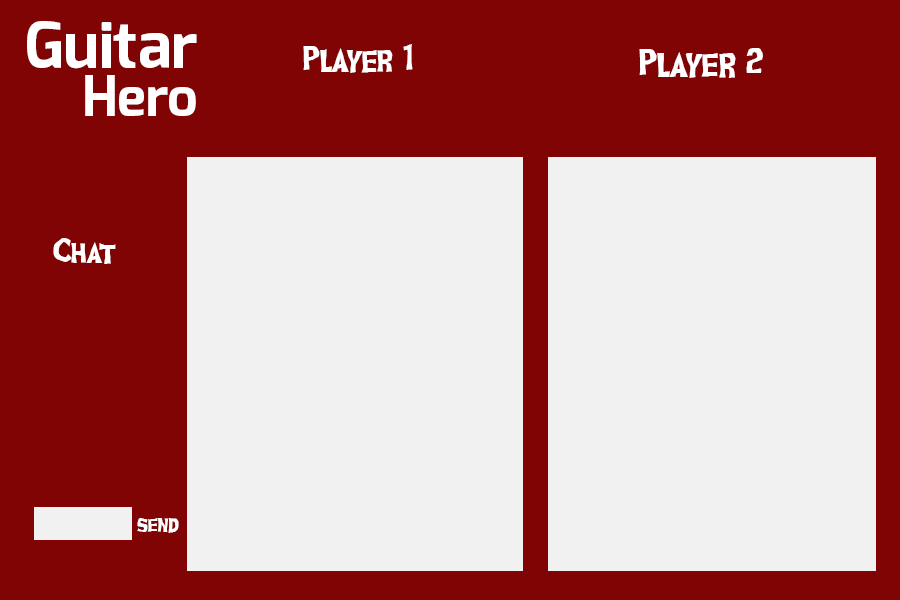
<style>
.page{position:relative;width:900px;height:600px;background:#f1f1f1}
.page>*{position:absolute;margin:0}
.t1{font:64px "Exo-Bold";color:#ffffff}
.t2{font:41px "GhoulishFrightAOE";color:#ffffff}
.t3{font:44px "GhoulishFrightAOE";color:#ffffff}
.t4{font:55px "Exo-Bold";color:#ffffff}
.t5{font:37px "GhoulishFrightAOE";color:#ffffff}
.t6{font:26px "GhoulishFrightAOE";color:#ffffff}
</style>
<div class="page">
<p class="t1" style="left:27px;top:21px;width:170px;height:48px">Guitar</p>
<p class="t2" style="left:303px;top:44px;width:110px;height:29px">Player 1</p>
<p class="t3" style="left:639px;top:48px;width:124px;height:30px">Player 2</p>
<p class="t4" style="left:85px;top:75px;width:111px;height:41px">Hero</p>
<p class="t5" style="left:53px;top:238px;width:63px;height:26px">Chat</p>
<p class="t6" style="left:137px;top:518px;width:42px;height:15px">send</p>
</div>
